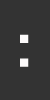
<style>
.page{position:relative;width:50px;height:100px;background:#333333}
.page>*{position:absolute;margin:0}
.t1{font:126.6px "POPit";color:#fcfafa}
</style>
<div class="page">
<p class="t1" style="left:20px;top:34px;width:9px;height:33px">:</p>
</div>
